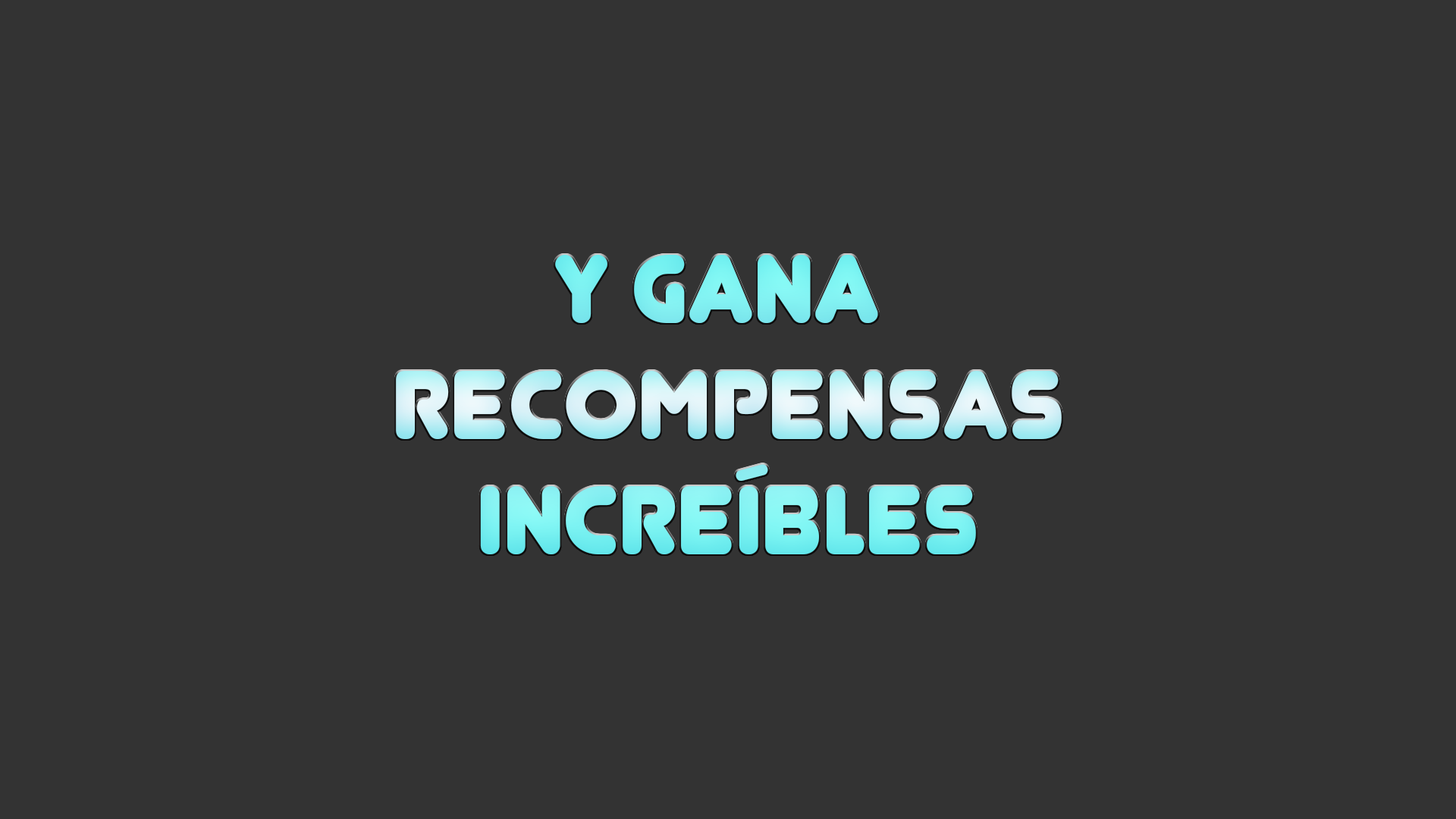
<style>
.page{position:relative;width:1456px;height:819px;background:#333333}
.page>*{position:absolute;margin:0}
.t1{font:96.3px "Junegull-Regular"}
</style>
<div class="page">
<p class="t1" style="left:396px;top:255px;width:666px;height:299px;text-align:center">Y Gana <br>recompensas<br>increíbles</p>
</div>
